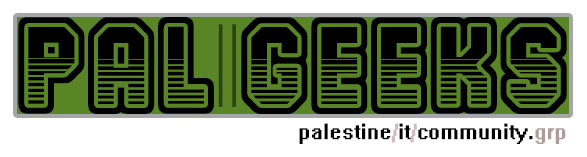
<style>
.page{position:relative;width:587px;height:157px;background:#ffffff}
.page>*{position:absolute;margin:0}
.t1{font:55.7px "Team401";color:#000000}
.t2{font:82.8px "MyriadPro-Regular";color:#2b4410;scale:0.68 1}
.t3{font:20px "System";color:#000000}
.t4{font:20px "System";color:#d0bebe}
.t5{font:20px "System";color:#ae9b9b}
</style>
<div class="page">
<p class="t1" style="left:18px;top:17px;width:549px;height:97px;text-align:right">Pal  geeks</p>
<p class="t2" style="left:218px;top:24px;width:18px;height:83px">||</p>
<p class="t3" style="left:299px;top:123px;width:267px;height:21px">palestine<span class="t4">/</span>it<span class="t4">/</span>community.<span class="t5">grp</span></p>
</div>
